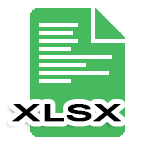
<style>
.page{position:relative;width:153px;height:150px;background:#ffffff}
.page>*{position:absolute;margin:0}
.t1{font:30.8px "ArialMT";color:#000000;font-variant:small-caps;font-weight:bold;scale:1.6 1}
</style>
<div class="page">
<p class="t1" style="left:12px;top:104px;width:110px;height:18px">xlsx</p>
</div>
